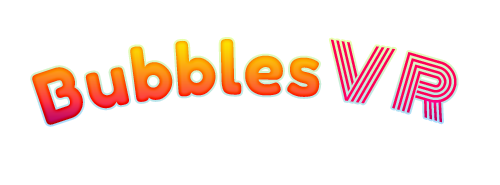
<style>
.page{position:relative;width:500px;height:185px;background:#ffffff}
.page>*{position:absolute;margin:0}
.t1{font:72px "FredokaOne-Regular"}
.t2{font:72px "Monoton-Regular"}
</style>
<div class="page">
<p class="t1" style="left:32px;top:39px;width:425px;height:86px">Bubbles<span class="t2">VR</span></p>
</div>
